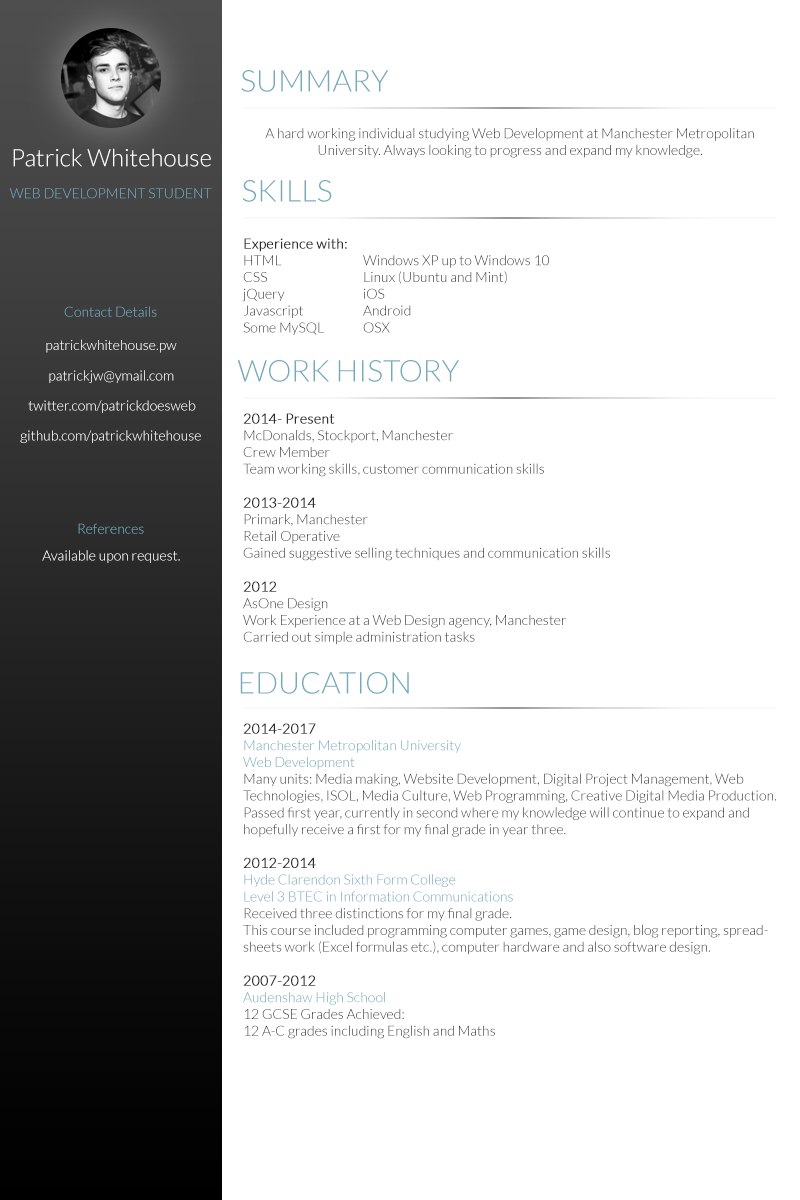
<style>
.page{position:relative;width:800px;height:1200px;background:#ffffff}
.page>*{position:absolute;margin:0}
.t1{font:30px "Lato-Light";color:#73aabd}
.t2{font:14px "Lato-Light";color:#2c2f30}
.t3{font:24px "Lato-Light";color:#ffffff}
.t4{font:14px "Lato-Light";color:#73aabd}
.t5{font:14px "Lato-Light";color:#2c2f30;font-weight:bold}
.t6{font:14px "Lato-Light";color:#ffffff}
.t7{font:14px "Lato-Light"}
</style>
<div class="page">
<p class="t1" style="left:241px;top:70px;width:148px;height:22px">SUMMARY</p>
<p class="t2" style="left:265px;top:128px;width:489px;height:30px;text-align:center">A hard working individual studying Web Development at Manchester Metropolitan <br>University. Always looking to progress and expand my knowledge.</p>
<p class="t3" style="left:13px;top:148px;width:198px;height:19px">Patrick Whitehouse</p>
<p class="t1" style="left:242px;top:180px;width:90px;height:22px">SKILLS</p>
<p class="t4" style="left:9px;top:188px;width:203px;height:11px">WEB DEVELOPMENT STUDENT</p>
<p class="t2" style="left:242px;top:238px;width:105px;height:97px"><span class="t5">Experience with:<br></span>HTML<br>CSS<br>jQuery<br>Javascript<br>Some MySQL</p>
<p class="t2" style="left:363px;top:255px;width:186px;height:78px"><span class="t5"><br></span>Windows XP up to Windows 10<br>Linux (Ubuntu and Mint)<br>iOS <br>Android<br>OSX</p>
<p class="t4" style="left:64px;top:306px;width:93px;height:11px">Contact Details</p>
<p class="t6" style="left:46px;top:339px;width:131px;height:14px">patrickwhitehouse.pw</p>
<p class="t1" style="left:237px;top:360px;width:222px;height:22px">WORK HISTORY</p>
<p class="t7" style="left:49px;top:370px;width:125px;height:13px">patrickjw@ymail.com</p>
<p class="t7" style="left:28px;top:400px;width:168px;height:13px">twitter.com/patrickdoesweb</p>
<p class="t2" style="left:243px;top:413px;width:367px;height:232px"><span class="t5">2014- Present<br></span>McDonalds, Stockport, Manchester<br>Crew Member<br>Team working skills, customer communication skills <br><br><span class="t5">2013-2014 <br></span>Primark, Manchester <br>Retail Operative<br>Gained suggestive selling techniques and communication skills<br><br><span class="t5">2012 <br></span>AsOne Design <br>Work Experience at a Web Design agency, Manchester<br>Carried out simple administration tasks</p>
<p class="t6" style="left:20px;top:430px;width:181px;height:13px">github.com/patrickwhitehouse</p>
<p class="t4" style="left:78px;top:523px;width:66px;height:11px">References</p>
<p class="t6" style="left:42px;top:550px;width:138px;height:13px">Available upon request.</p>
<p class="t1" style="left:240px;top:672px;width:169px;height:22px">EDUCATION</p>
<p class="t2" style="left:243px;top:723px;width:533px;height:316px"><span class="t5">2014-2017<br></span><span class="t4">Manchester Metropolitan University<br>Web Development</span> <br>Many units: Media making, Website Development, Digital Project Management, Web Technologies, ISOL, Media Culture, Web Programming, Creative Digital Media Production.<br>Passed first year, currently in second where my knowledge will continue to expand and hopefully receive a first for my final grade in year three.<br><br><span class="t5">2012-2014<br></span><span class="t4">Hyde Clarendon Sixth Form College<br>Level 3 BTEC in Information Communications<br></span>Received three distinctions for my final grade.<br>This course included programming computer games, game design, blog reporting, spreadsheets work (Excel formulas etc.), computer hardware and also software design. <br><br><span class="t5">2007-2012 <br></span><span class="t4">Audenshaw High School<br></span>12 GCSE Grades Achieved:<br>12 A-C grades including English and Maths</p>
</div>
